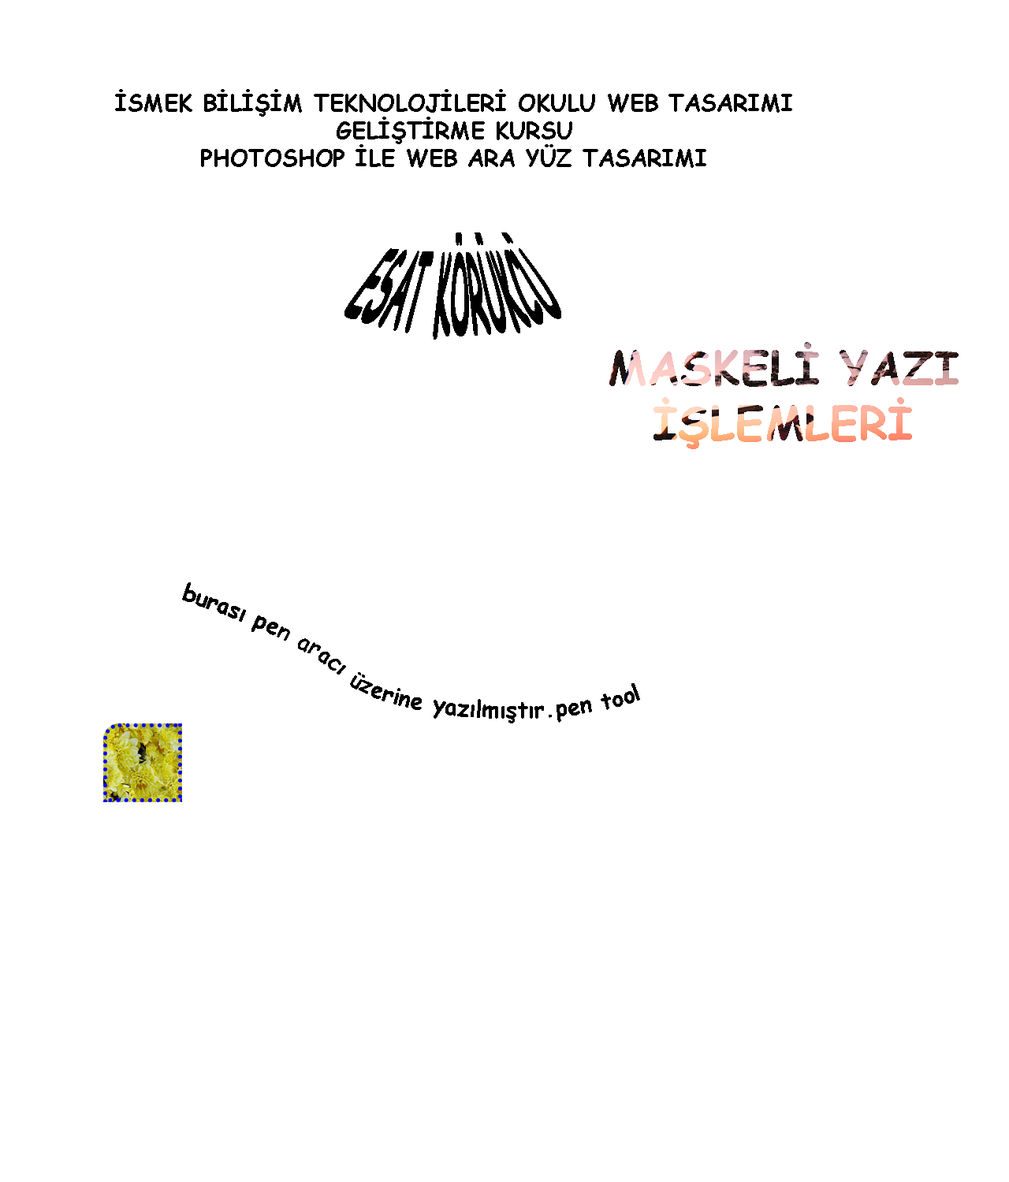
<style>
.page{position:relative;width:1009px;height:1182px;background:#ffffff}
.page>*{position:absolute;margin:0}
.t1{font:23px "ComicSansMS-Bold";color:#000000}
</style>
<div class="page">
<p class="t1" style="left:115px;top:89px;width:677px;height:79px;text-align:center">İSMEK BİLİŞİM TEKNOLOJİLERİ OKULU WEB TASARIMI  GELİŞTİRME KURSU<br>PHOTOSHOP İLE WEB ARA YÜZ TASARIMI</p>
<p class="t1" style="left:182px;top:582px;width:458px;height:141px">burası pen aracı üzerine yazılmıştır.pen tool</p>
</div>
